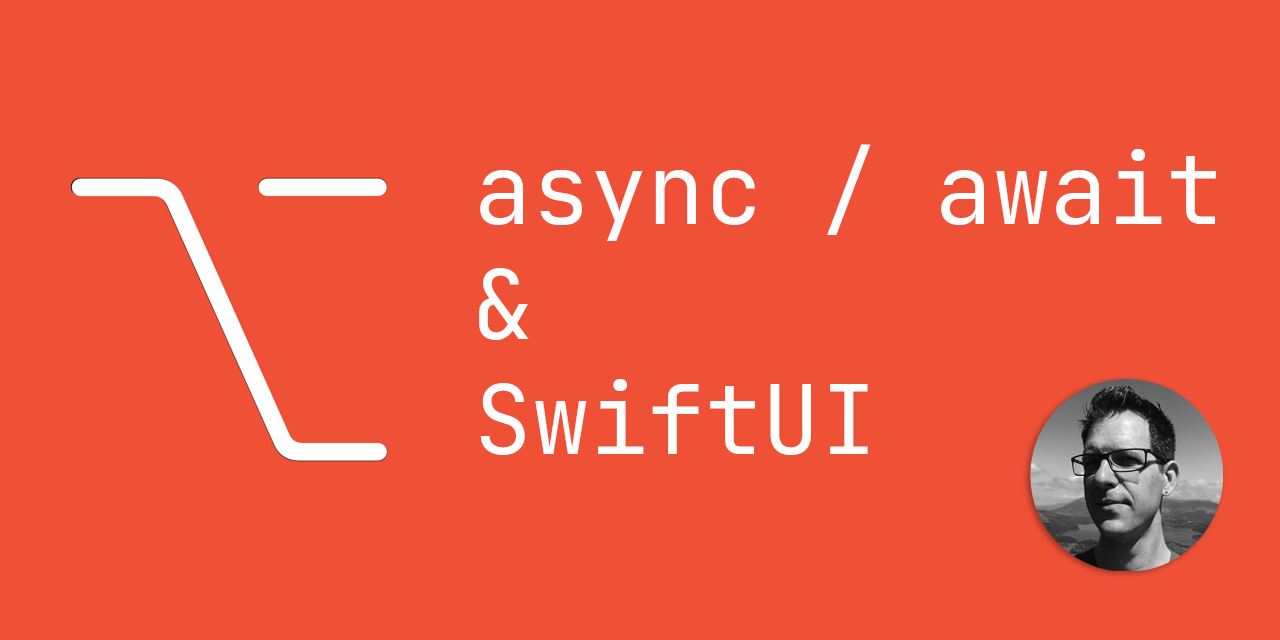
<style>
.page{position:relative;width:1280px;height:640px;background:#ef5137}
.page>*{position:absolute;margin:0}
.t1{font:96px "JetBrainsMono-Regular";color:#fefefe}
</style>
<div class="page">
<p class="t1" style="left:479px;top:144px;width:737px;height:311px">async / await<br>&amp;<br>SwiftUI</p>
</div>
